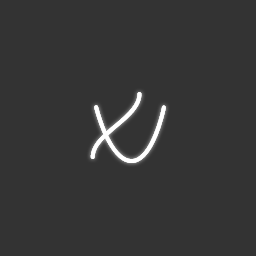
<style>
.page{position:relative;width:256px;height:256px;background:#333333}
.page>*{position:absolute;margin:0}
.t1{font:96px "BetterTogetherDemo";color:#ffffff}
</style>
<div class="page">
<p class="t1" style="left:90px;top:92px;width:76px;height:71px">x</p>
</div>
